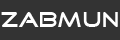
<style>
.page{position:relative;width:120px;height:40px;background:#333333}
.page>*{position:absolute;margin:0}
.t1{font:20.3px "GoodTimes";color:#ffffff}
</style>
<div class="page">
<p class="t1" style="left:1px;top:12px;width:117px;height:15px">ZABMUN</p>
</div>
